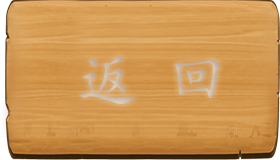
<style>
.page{position:relative;width:280px;height:160px}
.page>*{position:absolute;margin:0}
.t1{font:60px "STKaiti";color:#cab9a9}
</style>
<div class="page">
<p class="t1" style="left:80px;top:56px;width:140px;height:48px">返  回</p>
</div>
